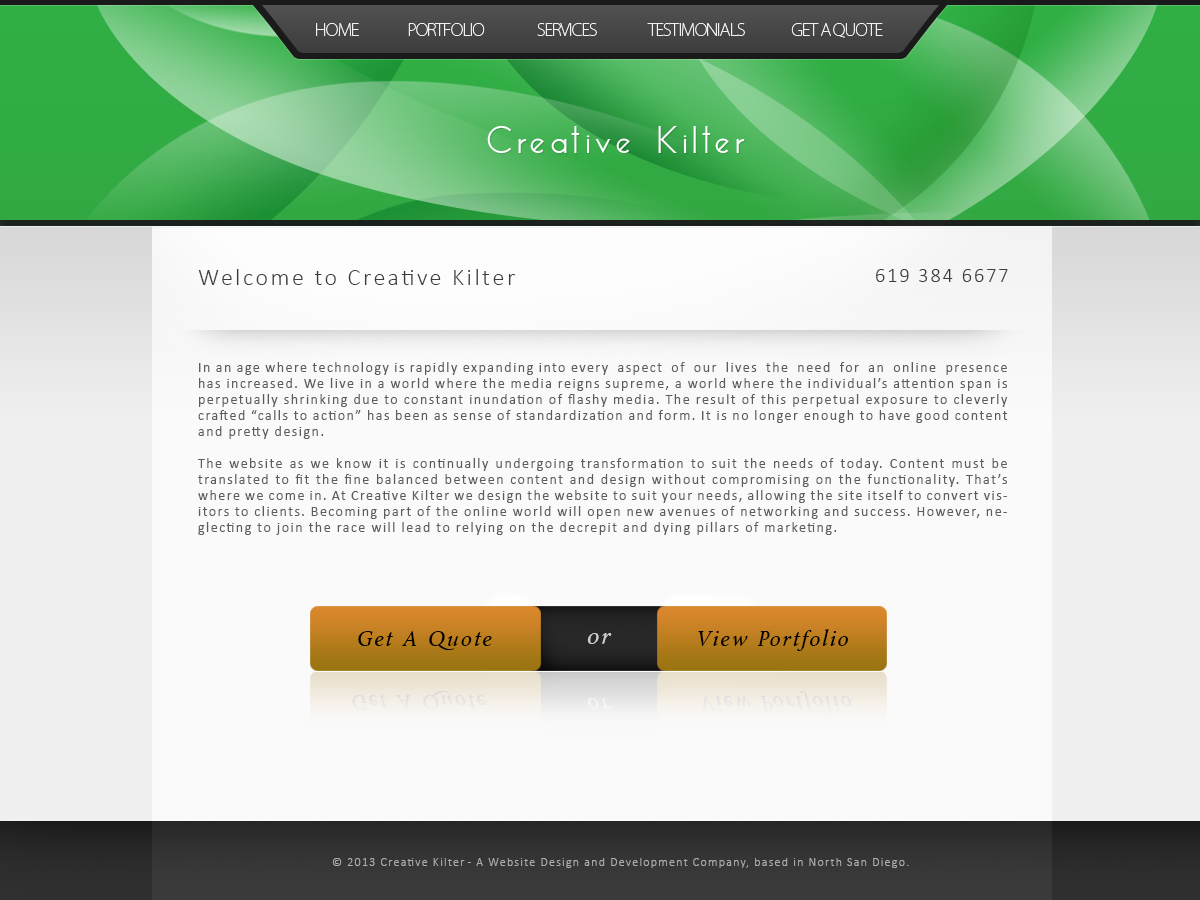
<style>
.page{position:relative;width:1200px;height:900px;background:#fafafa}
.page>*{position:absolute;margin:0}
.t1{font:17px "KozGoPro-ExtraLight";letter-spacing:-0.06em;color:#ffffff}
.t2{font:36px "EssenceSans-Regular";letter-spacing:0.105em;color:#ffffff}
.t3{font:36px "EssenceSans-Regular";letter-spacing:0.105em}
.t4{font:24px "Calibri-Light";letter-spacing:0.105em;color:#3d3d3d}
.t5{font:20px "Calibri-Light";letter-spacing:0.105em;color:#3d3d3d}
.t6{font:14px/16px "Calibri";letter-spacing:0.105em;color:#5c5c5c}
.t7{font:20px "Byington-Italic";letter-spacing:0.105em;color:#000000}
.t8{font:22px "Byington-Italic";letter-spacing:0.105em;color:#cfcfcf}
.t9{font:12px "Calibri-Light";letter-spacing:0.105em;color:#aeaeae}
</style>
<div class="page">
<p class="t1" style="left:316px;top:23px;width:567px;height:15px;opacity:0.9">HOME          PORTFOLIO     SERVICES     TESTIMONIALS                GET A QUOTE</p>
<p class="t2" style="left:487px;top:125px;width:258px;height:29px">Creative Kilter</p>
<p class="t3" style="left:488px;top:126px;width:258px;height:29px">Creative Kilter</p>
<p class="t4" style="left:198px;top:269px;width:317px;height:16px">Welcome to Creative Kilter</p>
<p class="t5" style="left:876px;top:269px;width:132px;height:13px">619 384 6677</p>
<p class="t6" style="left:198px;top:362px;width:810px;height:173px;text-align:justify">In an age where technology is rapidly expanding into every  aspect  of  our  lives  the  need  for  an  online  presence  has increased. We live in a world where the media reigns supreme, a world where the individual’s attention span is perpetually shrinking due to constant inundation of flashy media. The result of this perpetual exposure to cleverly crafted “calls to action” has been as sense of standardization and form. It is no longer enough to have good content and pretty design. <br><br>The website as we know it is continually undergoing transformation to suit the needs of today. Content must be translated to fit the fine balanced between content and design without compromising on the functionality. That’s where we come in. At Creative Kilter we design the website to suit your needs, allowing the site itself to convert visitors to clients. Becoming part of the online world will open new avenues of networking and success. However, neglecting to join the race will lead to relying on the decrepit and dying pillars of marketing.</p>
<p class="t7" style="left:698px;top:629px;width:150px;height:22px">View Portfolio</p>
<p class="t7" style="left:358px;top:631px;width:134px;height:19px">Get A Quote</p>
<p class="t8" style="left:587px;top:633px;width:25px;height:11px">or</p>
<p class="t9" style="left:332px;top:858px;width:577px;height:10px">© 2013 Creative Kilter - A Website Design and Development Company, based in North San Diego.</p>
</div>
